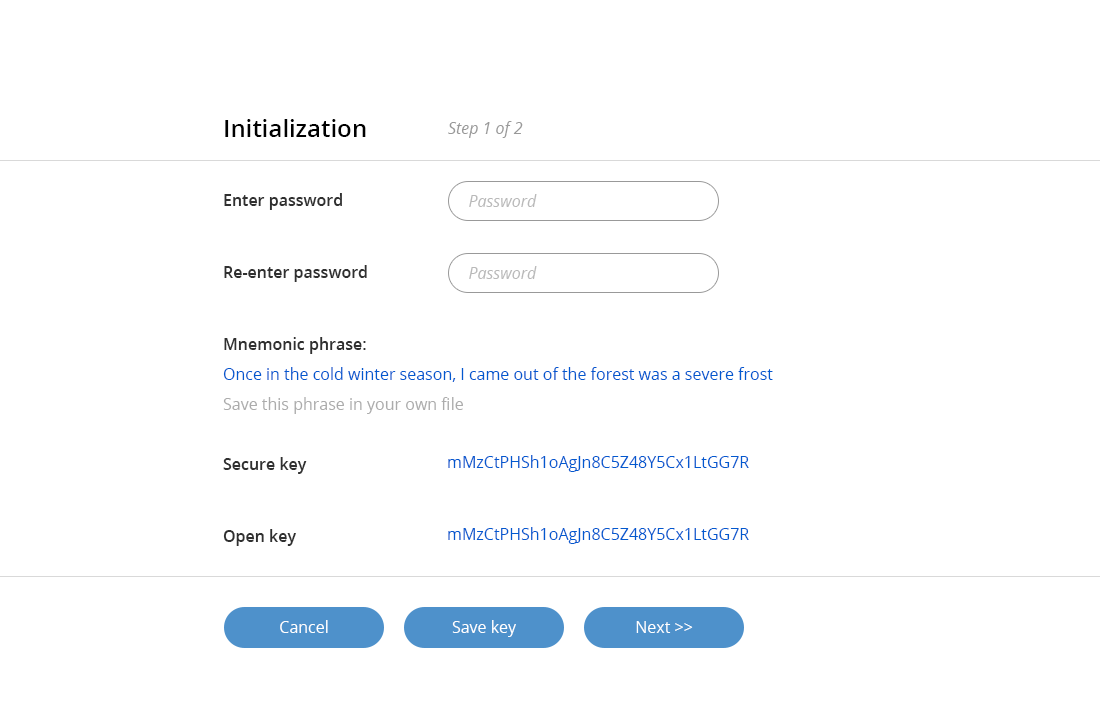
<style>
.page{position:relative;width:1100px;height:711px;background:#ffffff}
.page>*{position:absolute;margin:0}
.t1{font:24px "OpenSans-Semibold";color:#000000}
.t2{font:16px "OpenSans-Italic";color:#999999}
.t3{font:16px "OpenSans-Semibold";color:#303030}
.t4{font:16px "OpenSans-Italic";color:#b9b9b9}
.t5{font:16px "OpenSans";color:#0259cf}
.t6{font:16px "OpenSans";color:#acacac}
.t7{font:16px "OpenSans";color:#ffffff}
</style>
<div class="page">
<p class="t1" style="left:225px;top:119px;width:141px;height:18px">Initialization</p>
<p class="t2" style="left:448px;top:121px;width:75px;height:17px">Step 1 of 2</p>
<p class="t3" style="left:224px;top:193px;width:118px;height:17px">Enter password</p>
<p class="t4" style="left:469px;top:194px;width:68px;height:13px">Password</p>
<p class="t3" style="left:224px;top:265px;width:143px;height:17px">Re-enter password</p>
<p class="t4" style="left:469px;top:266px;width:68px;height:13px">Password</p>
<p class="t3" style="left:224px;top:337px;width:142px;height:17px">Mnemonic phrase:</p>
<p class="t5" style="left:223px;top:367px;width:550px;height:15px">Once in the cold winter season, I came out of the forest was a severe frost</p>
<p class="t6" style="left:223px;top:397px;width:240px;height:17px">Save this phrase in your own file</p>
<p class="t3" style="left:223px;top:457px;width:84px;height:17px">Secure key</p>
<p class="t5" style="left:448px;top:455px;width:301px;height:17px">mMzCtPHSh1oAgJn8C5Z48Y5Cx1LtGG7R</p>
<p class="t3" style="left:223px;top:529px;width:73px;height:17px">Open key</p>
<p class="t5" style="left:448px;top:527px;width:301px;height:17px">mMzCtPHSh1oAgJn8C5Z48Y5Cx1LtGG7R</p>
<p class="t7" style="left:280px;top:620px;width:48px;height:13px">Cancel</p>
<p class="t7" style="left:452px;top:620px;width:64px;height:17px">Save key</p>
<p class="t7" style="left:636px;top:621px;width:57px;height:12px">Next &gt;&gt;</p>
</div>
